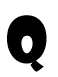
<style>
.page{position:relative;width:58px;height:77px;background:#ffffff}
.page>*{position:absolute;margin:0}
.t1{font:60px "ShowcardGothic-Reg";color:#000000}
</style>
<div class="page">
<p class="t1" style="left:7px;top:15px;width:40px;height:57px">Q</p>
</div>
